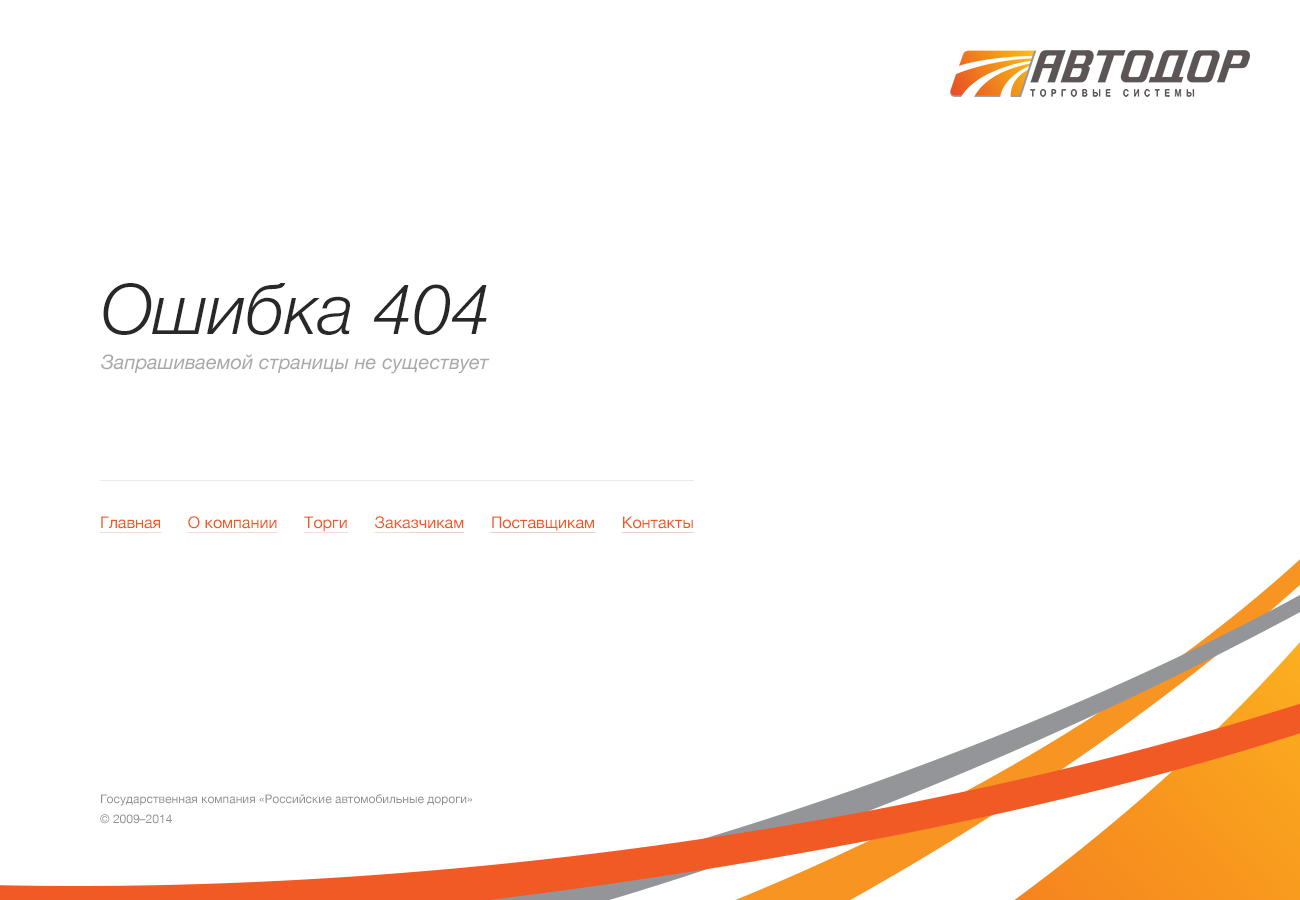
<style>
.page{position:relative;width:1300px;height:900px;background:#ffffff}
.page>*{position:absolute;margin:0}
.t1{font:20px/35px "HelveticaNeue-Italic";color:#a9a9a9}
.t2{font:70px/35px "HelveticaNeue-LightItalic";color:#282828}
.t3{font:16px "HelveticaNeue";color:#f15922;text-decoration:underline}
.t4{font:12px/20px "HelveticaNeue";color:#909090}
</style>
<div class="page">
<p class="t1" style="left:101px;top:283px;width:389px;height:91px"><span class="t2">Ошибка 404<br></span>Запрашиваемой страницы не существует</p>
<p class="t3" style="left:100px;top:516px;width:594px;height:17px">Главная      О компании      Торги      Заказчикам      Поставщикам      Контакты</p>
<p class="t4" style="left:100px;top:794px;width:372px;height:30px">Государственная компания «Российские автомобильные дороги»<br>© 2009–2014</p>
</div>
